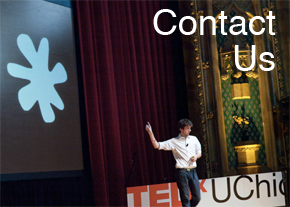
<style>
.page{position:relative;width:290px;height:207px}
.page>*{position:absolute;margin:0}
.t1{font:36px/36px "Helvetica";color:#ffffff}
</style>
<div class="page">
<p class="t1" style="left:153px;top:9px;width:123px;height:62px;text-align:right">Contact<br>Us</p>
</div>
